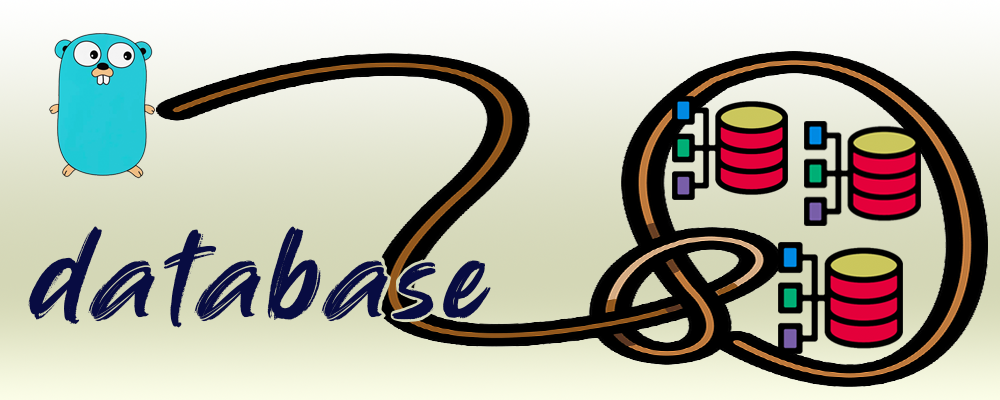
<style>
.page{position:relative;width:1000px;height:400px}
.page>*{position:absolute;margin:0}
.t1{font:128px "Golang";letter-spacing:0.045em;color:#080c42;font-style:italic}
</style>
<div class="page">
<p class="t1" style="left:28px;top:226px;width:463px;height:102px">database</p>
</div>
